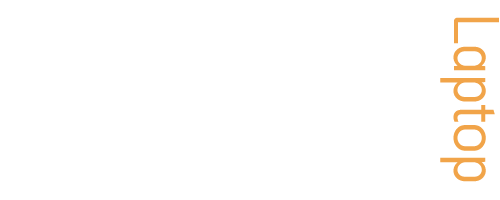
<style>
.page{position:relative;width:500px;height:200px;background:#ffffff}
.page>*{position:absolute;margin:0}
.t1{font:62.5px "SVN-Arch";color:#f1a449}
</style>
<div class="page">
<p class="t1" style="left:440px;top:17px;width:59px;height:165px;rotate:90deg">Laptop</p>
</div>
